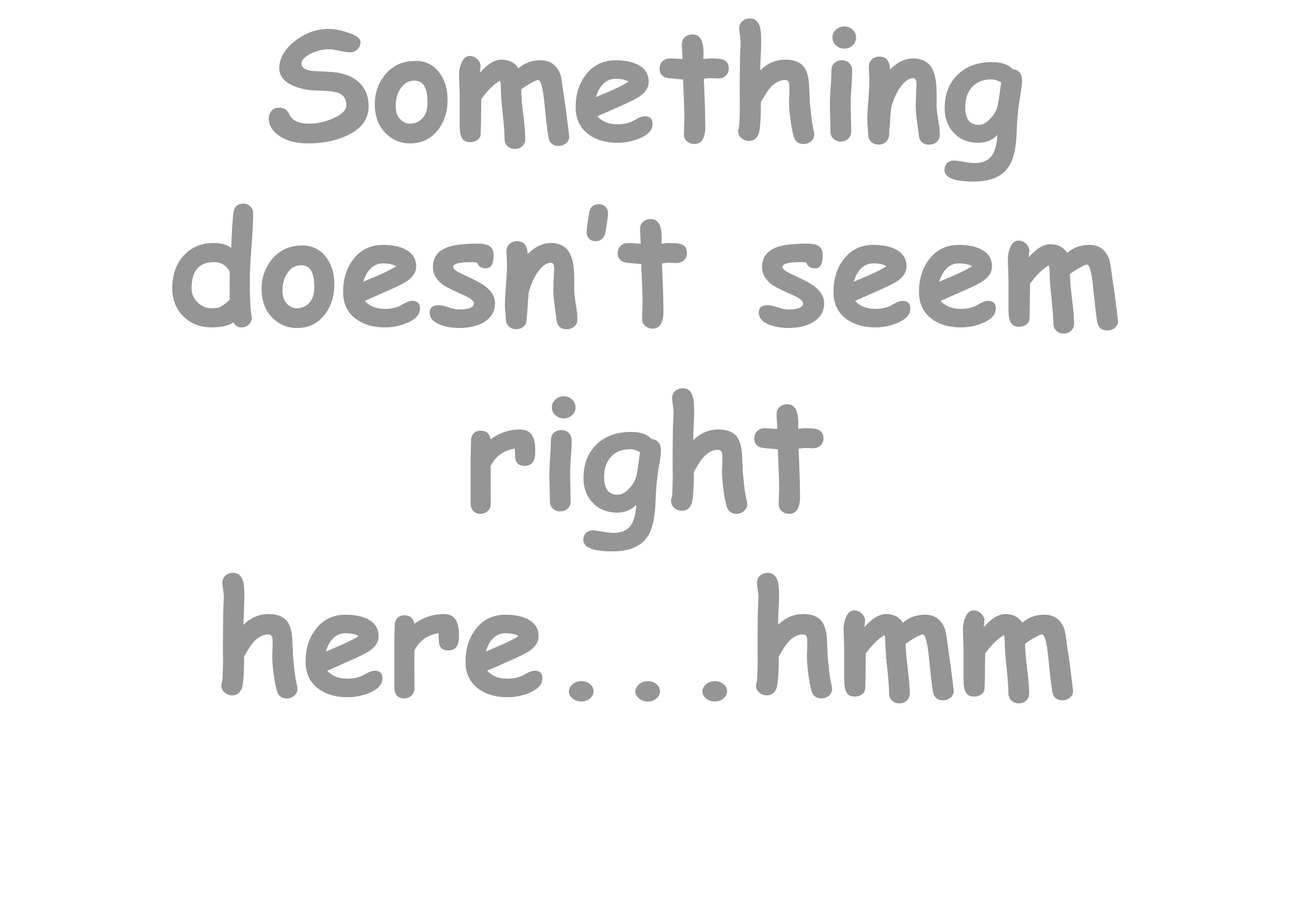
<style>
.page{position:relative;width:1292px;height:923px;background:#ffffff}
.page>*{position:absolute;margin:0}
.t1{font:153.8px "ComicSansMS-Bold";color:#959595}
</style>
<div class="page">
<p class="t1" style="left:172px;top:18px;width:947px;height:685px;text-align:center">Something doesn’t seem right here...hmm</p>
</div>
